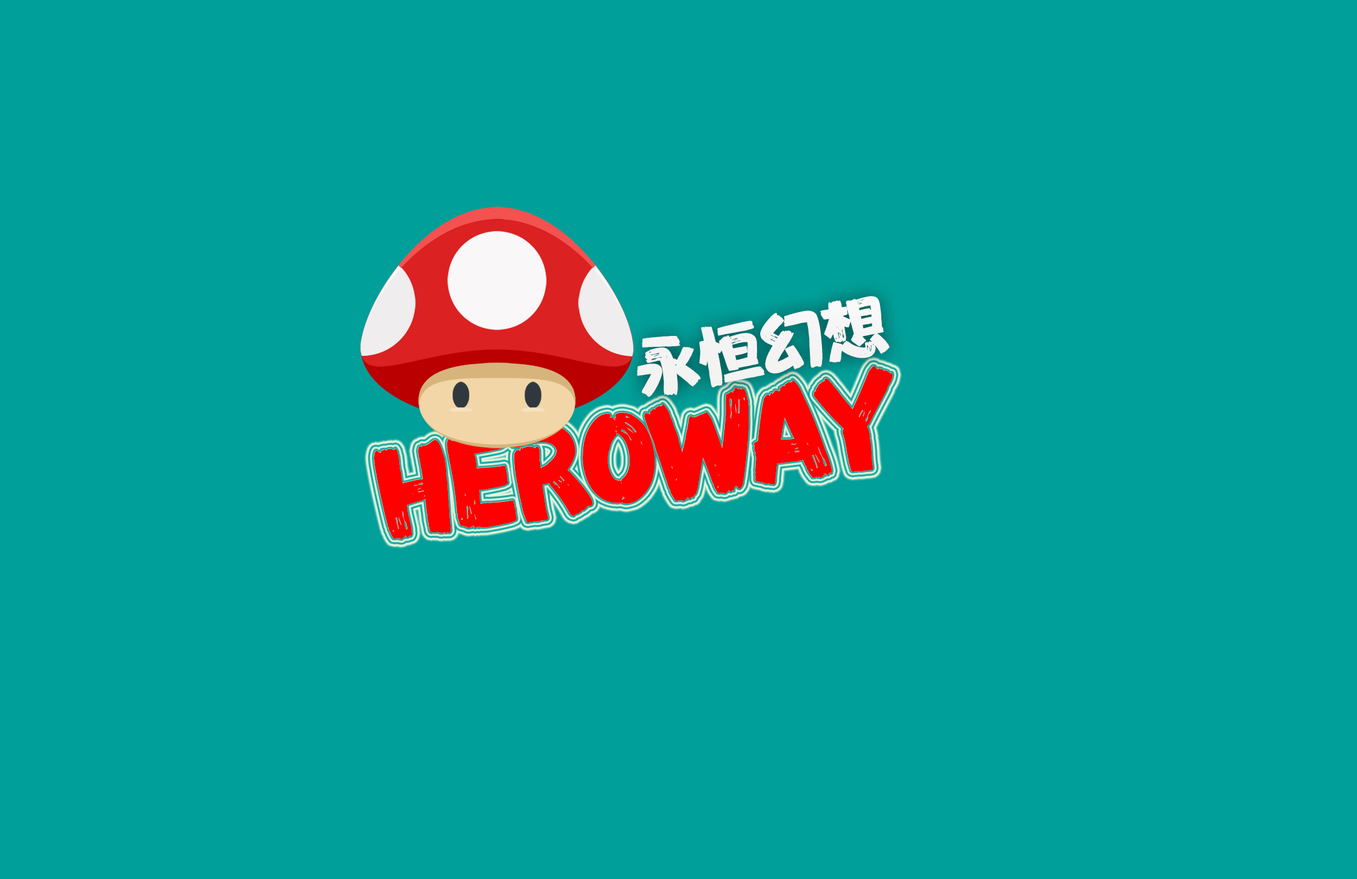
<style>
.page{position:relative;width:1357px;height:879px;background:#019f99}
.page>*{position:absolute;margin:0}
.t1{font:63.7px "FZFENSTXJW--GB1-0";color:#ffffff}
.t2{font:117.9px "FZFENSTXJW--GB1-0";letter-spacing:-0.08em;color:#ff0000}
</style>
<div class="page">
<p class="t1" style="left:636px;top:296px;width:253px;height:101px;rotate:-11deg">永恒幻想</p>
<p class="t2" style="left:374px;top:366px;width:519px;height:173px;rotate:-9deg">HEROWAY</p>
</div>
